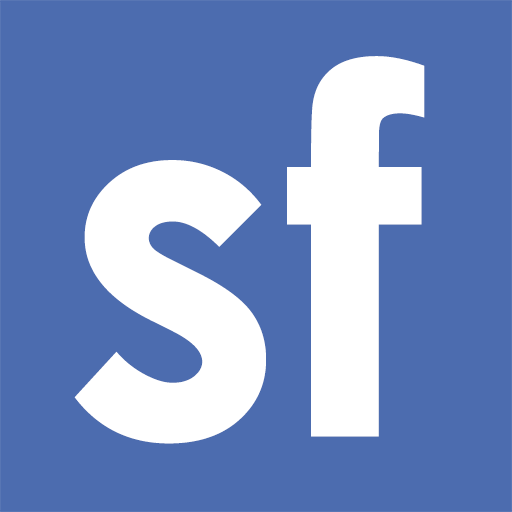
<style>
.page{position:relative;width:512px;height:512px;background:#4c6caf}
.page>*{position:absolute;margin:0}
.t1{font:506.9px "CenturyGothic-Bold";color:#ffffff}
</style>
<div class="page">
<p class="t1" style="left:74px;top:56px;width:351px;height:388px">sf</p>
</div>
